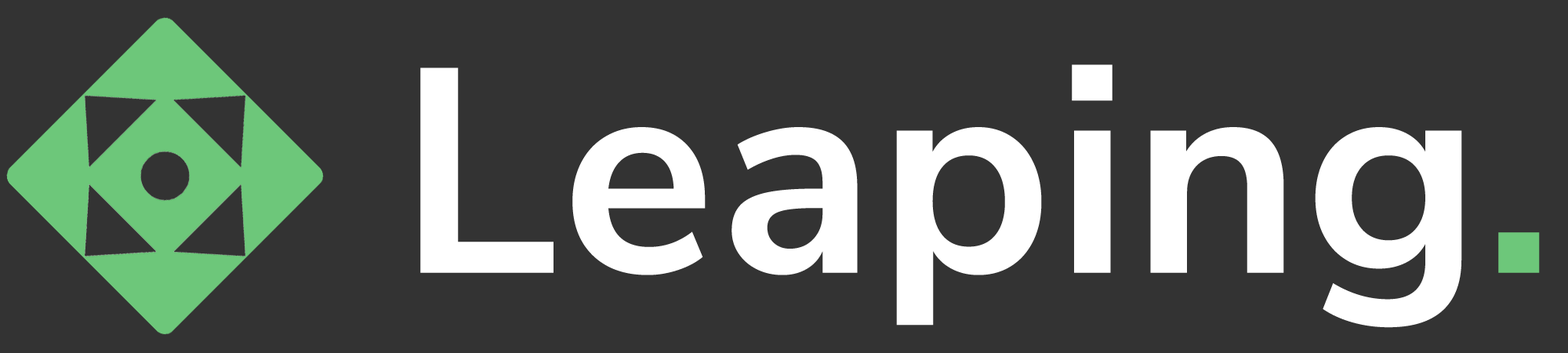
<style>
.page{position:relative;width:1568px;height:353px;background:#333333}
.page>*{position:absolute;margin:0}
.t1{font:290.1px "NunitoSans-Bold";letter-spacing:0.01em;color:#ffffff}
.t2{font:290.1px "NunitoSans-Bold";letter-spacing:0.01em;color:#6dc77a}
</style>
<div class="page">
<p class="t1" style="left:420px;top:64px;width:1120px;height:264px">Leaping<span class="t2">.</span></p>
</div>
